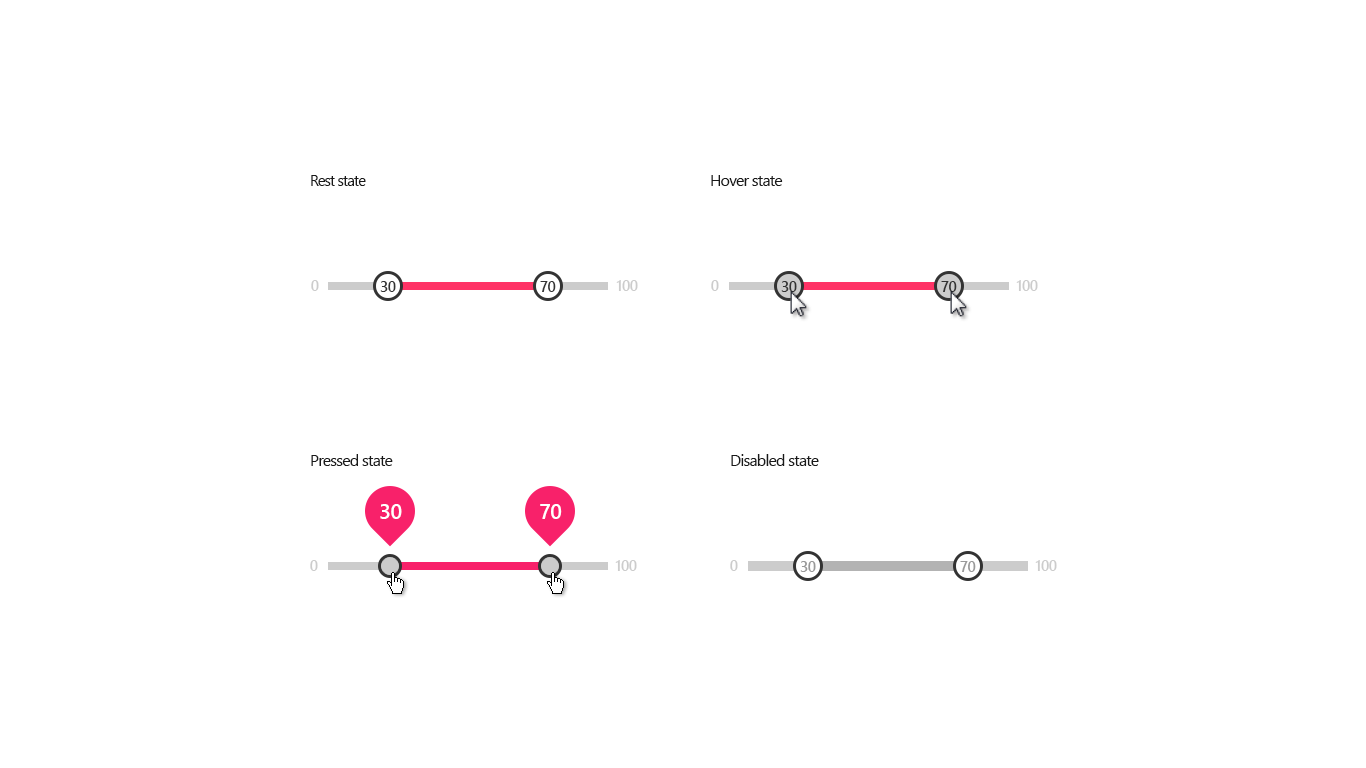
<style>
.page{position:relative;width:1366px;height:768px;background:#ffffff}
.page>*{position:absolute;margin:0}
.t1{font:14.7px "SegoeUI";letter-spacing:-0.05em;color:#191919}
.t2{font:16px "SegoeUI";letter-spacing:-0.05em;color:#191919}
.t3{font:14.7px "SegoeUI-Semibold";letter-spacing:-0.025em;color:#cccccc}
.t4{font:14.7px "SegoeUI-Semibold";letter-spacing:-0.025em;color:#333333}
.t5{font:21.3px "SegoeUI-Semibold";letter-spacing:-0.025em;color:#ffffff}
.t6{font:14.7px "SegoeUI-Semibold";letter-spacing:-0.025em;color:#999999}
</style>
<div class="page">
<p class="t1" style="left:311px;top:175px;width:55px;height:11px">Rest state</p>
<p class="t2" style="left:711px;top:175px;width:72px;height:11px">Hover state</p>
<p class="t3" style="left:311px;top:280px;width:8px;height:11px">0</p>
<p class="t4" style="left:380px;top:281px;width:16px;height:11px">30</p>
<p class="t4" style="left:540px;top:281px;width:16px;height:11px">70</p>
<p class="t3" style="left:616px;top:280px;width:22px;height:11px">100</p>
<p class="t3" style="left:711px;top:280px;width:8px;height:11px">0</p>
<p class="t4" style="left:781px;top:281px;width:16px;height:11px">30</p>
<p class="t4" style="left:941px;top:281px;width:16px;height:11px">70</p>
<p class="t3" style="left:1016px;top:280px;width:22px;height:11px">100</p>
<p class="t2" style="left:311px;top:454px;width:82px;height:12px">Pressed state</p>
<p class="t2" style="left:731px;top:454px;width:88px;height:12px">Disabled state</p>
<p class="t5" style="left:380px;top:504px;width:22px;height:15px">30</p>
<p class="t5" style="left:540px;top:504px;width:22px;height:15px">70</p>
<p class="t3" style="left:310px;top:560px;width:8px;height:11px">0</p>
<p class="t3" style="left:615px;top:560px;width:22px;height:11px">100</p>
<p class="t3" style="left:730px;top:560px;width:8px;height:11px">0</p>
<p class="t6" style="left:800px;top:561px;width:16px;height:11px">30</p>
<p class="t6" style="left:960px;top:561px;width:16px;height:11px">70</p>
<p class="t3" style="left:1035px;top:560px;width:22px;height:11px">100</p>
</div>
